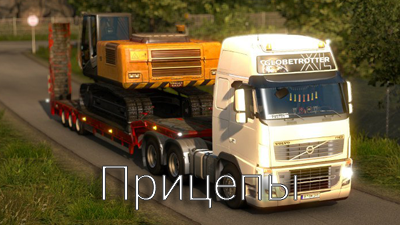
<style>
.page{position:relative;width:400px;height:225px}
.page>*{position:absolute;margin:0}
.t1{font:48px "Roboto-Light"}
</style>
<div class="page">
<p class="t1" style="left:102px;top:166px;width:195px;height:44px">Прицепы</p>
</div>
